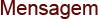
<style>
.page{position:relative;width:98px;height:19px;background:#ffffff}
.page>*{position:absolute;margin:0}
.t1{font:20px "ArialMT";color:#620907}
</style>
<div class="page">
<p class="t1" style="left:0px;top:0px;width:98px;height:19px">Mensagem</p>
</div>
